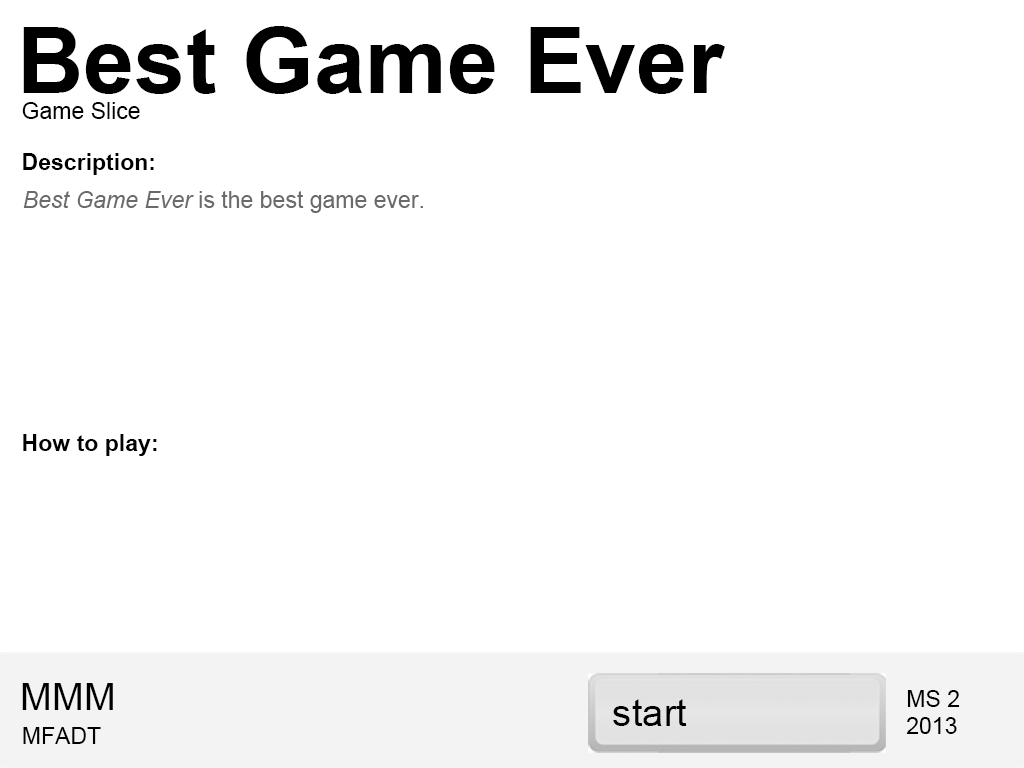
<style>
.page{position:relative;width:1024px;height:768px;background:#ffffff}
.page>*{position:absolute;margin:0}
.t1{font:92.2px "Arial-BoldMT";color:#000000}
.t2{font:23px "ArialMT";color:#000000}
.t3{font:23px "Arial-BoldMT";color:#000000}
.t4{font:23px "ArialMT";color:#6a6a6a}
.t5{font:23px "Arial-ItalicMT";color:#6a6a6a}
.t6{font:38.4px "ArialMT";color:#000000}
</style>
<div class="page">
<p class="t1" style="left:23px;top:26px;width:702px;height:68px">Best Game Ever</p>
<p class="t2" style="left:22px;top:102px;width:118px;height:17px">Game Slice</p>
<p class="t3" style="left:23px;top:153px;width:131px;height:22px">Description:</p>
<p class="t4" style="left:23px;top:191px;width:400px;height:22px"><span class="t5">Best Game Ever </span>is the best game ever.</p>
<p class="t3" style="left:23px;top:434px;width:134px;height:22px">How to play:</p>
<p class="t6" style="left:22px;top:683px;width:91px;height:27px">MMM</p>
<p class="t6" style="left:613px;top:699px;width:74px;height:27px">start</p>
<p class="t2" style="left:906px;top:690px;width:54px;height:44px">MS 2<br>2013</p>
<p class="t2" style="left:23px;top:727px;width:78px;height:17px">MFADT</p>
</div>
